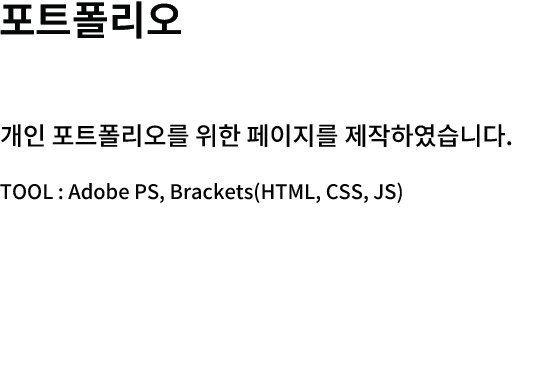
<style>
.page{position:relative;width:555px;height:390px;background:#ffffff}
.page>*{position:absolute;margin:0}
.t1{font:40px "NotoSansKR-SemiBold";color:#000000}
.t2{font:20px "NotoSansKR-Medium";color:#000000}
.t3{font:25px "NotoSansKR-Medium";color:#000000}
</style>
<div class="page">
<p class="t1" style="left:0px;top:1px;width:181px;height:38px">포트폴리오</p>
<p class="t2" style="left:0px;top:124px;width:512px;height:79px"><span class="t3">개인 포트폴리오를 위한 페이지를 제작하였습니다.<br><br></span>TOOL : Adobe PS, Brackets(HTML, CSS, JS)</p>
</div>
